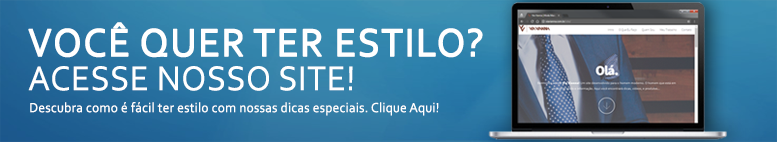
<style>
.page{position:relative;width:777px;height:142px}
.page>*{position:absolute;margin:0}
.t1{font:41px "Corbel";letter-spacing:0.02em;color:#ffffff;font-weight:bold;scale:0.95 1}
.t2{font:36px "Corbel";letter-spacing:0.02em;color:#ffffff;scale:0.95 1}
.t3{font:14px "Corbel";letter-spacing:0.02em;color:#ffffff;scale:0.95 1}
</style>
<div class="page">
<p class="t1" style="left:28px;top:22px;width:455px;height:36px">VOCÊ QUER TER ESTILO?</p>
<p class="t2" style="left:28px;top:66px;width:325px;height:25px">ACESSE NOSSO SITE!</p>
<p class="t3" style="left:30px;top:102px;width:409px;height:14px">Descubra como é fácil ter estilo com nossas dicas especiais. Clique Aqui!</p>
</div>
